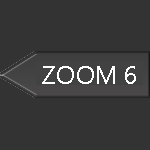
<style>
.page{position:relative;width:150px;height:150px;background:#333333}
.page>*{position:absolute;margin:0}
.t1{font:25px "Gadugi";letter-spacing:0.005em;color:#ffffff}
</style>
<div class="page">
<p class="t1" style="left:42px;top:66px;width:94px;height:18px">ZOOM 6</p>
</div>
